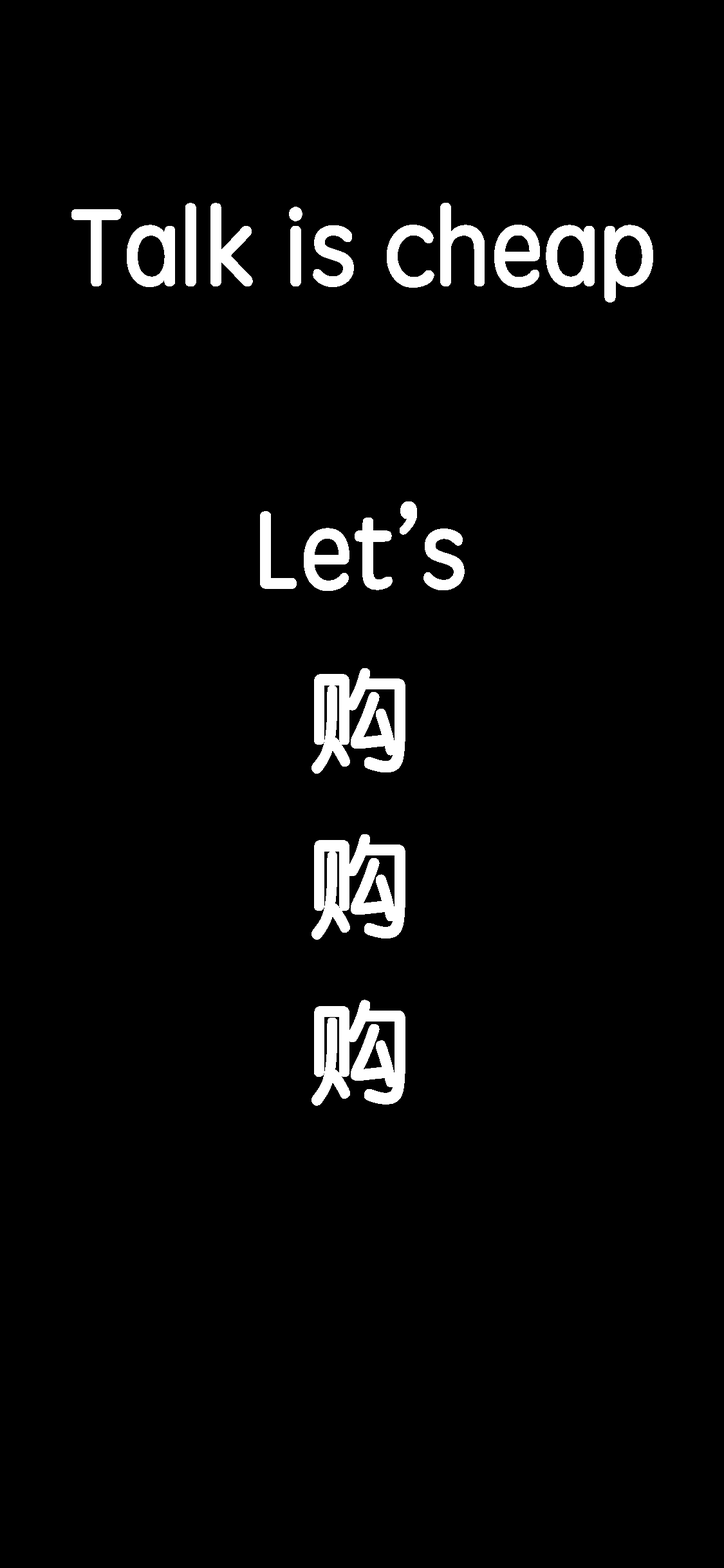
<style>
.page{position:relative;width:724px;height:1568px;background:#000000}
.page>*{position:absolute;margin:0}
.t1{font:107.2px "STYuanti-SC-Regular";color:#ffffff;font-weight:bold;scale:0.92 1}
</style>
<div class="page">
<p class="t1" style="left:71px;top:203px;width:582px;height:100px">Talk is cheap</p>
<p class="t1" style="left:260px;top:501px;width:205px;height:605px">Let’s <br><br>  购<br><br>  购<br><br>  购</p>
</div>
